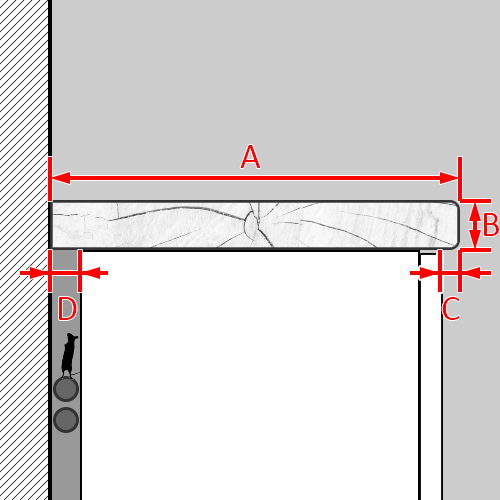
<style>
.page{position:relative;width:500px;height:500px;background:#ffffff}
.page>*{position:absolute;margin:0}
.t1{font:36px "Calibri";color:#ff0000}
</style>
<div class="page">
<p class="t1" style="left:240px;top:145px;width:21px;height:23px">A</p>
<p class="t1" style="left:484px;top:213px;width:15px;height:23px">B</p>
<p class="t1" style="left:59px;top:297px;width:18px;height:23px">D</p>
<p class="t1" style="left:442px;top:297px;width:18px;height:23px">C</p>
</div>
